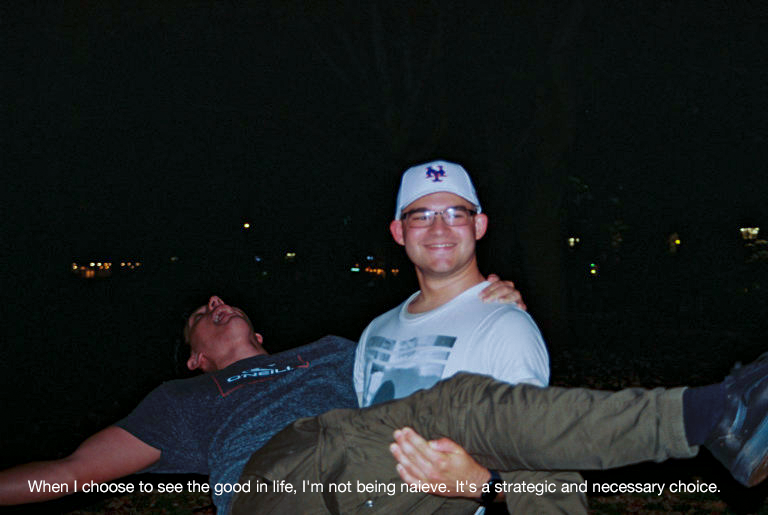
<style>
.page{position:relative;width:768px;height:515px}
.page>*{position:absolute;margin:0}
.t1{font:16px "HelveticaNeue";color:#ffffff}
</style>
<div class="page">
<p class="t1" style="left:28px;top:480px;width:692px;height:16px">When I choose to see the good in life, I'm not being naieve. It's a strategic and necessary choice.</p>
</div>
